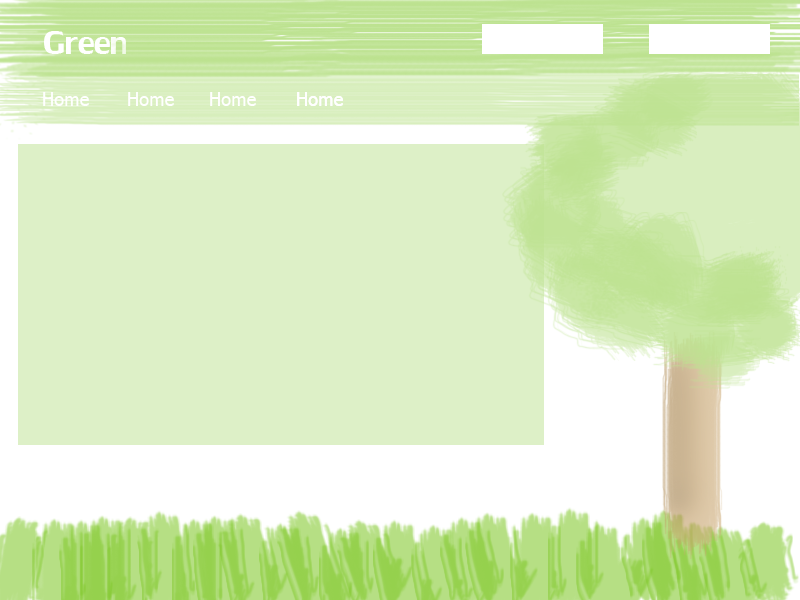
<style>
.page{position:relative;width:800px;height:600px;background:#ddf0c7}
.page>*{position:absolute;margin:0}
.t1{font:19.1px "Tahoma";color:#ffffff;scale:0.96 1}
</style>
<div class="page">
<p class="t1" style="left:43px;top:92px;width:46px;height:14px">Home</p>
<p class="t1" style="left:128px;top:92px;width:46px;height:14px">Home</p>
<p class="t1" style="left:210px;top:92px;width:46px;height:14px">Home</p>
<p class="t1" style="left:297px;top:92px;width:46px;height:14px">Home</p>
<p class="t1" style="left:297px;top:92px;width:46px;height:14px">Home</p>
</div>
